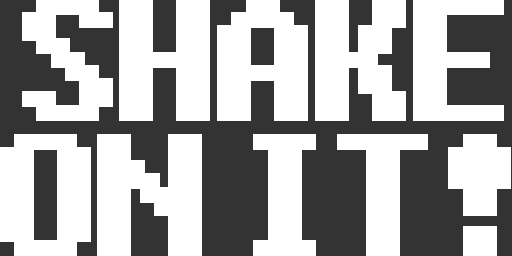
<style>
.page{position:relative;width:512px;height:256px;background:#ffffff}
.page>*{position:absolute;margin:0}
.t1{font:169.8px/134.7px "Fixedsys";letter-spacing:-0.17em;color:#ffffff;text-transform:uppercase;font-weight:bold;scale:1.07 1}
</style>
<div class="page">
<p class="t1" style="left:0px;top:0px;width:511px;height:256px;text-align:center">Shake<br>on It!</p>
</div>
